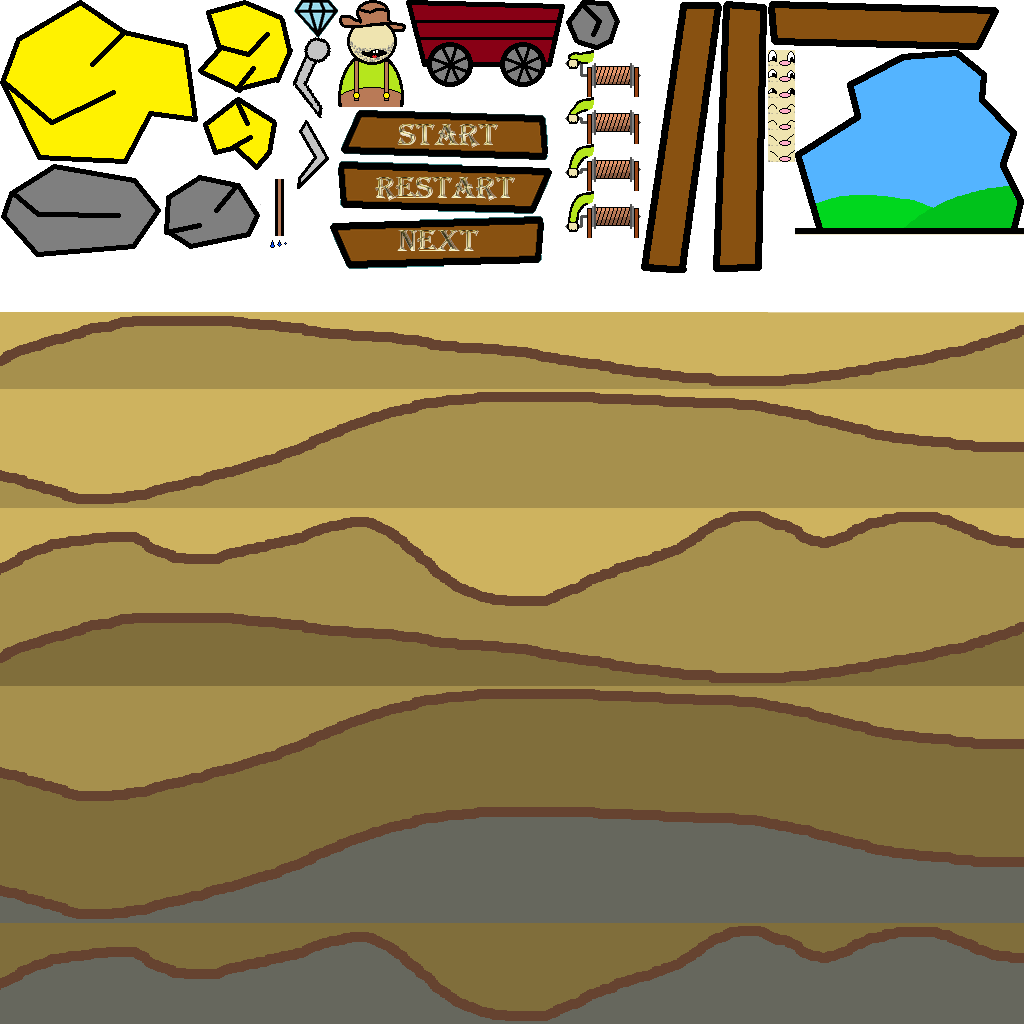
<style>
.page{position:relative;width:1024px;height:1024px;background:#a6904d}
.page>*{position:absolute;margin:0}
.t1{font:32px "Algerian"}
</style>
<div class="page">
<p class="t1" style="left:397px;top:124px;width:101px;height:24px">Start</p>
<p class="t1" style="left:397px;top:124px;width:101px;height:24px">Start</p>
<p class="t1" style="left:375px;top:177px;width:140px;height:24px">Restart</p>
<p class="t1" style="left:375px;top:177px;width:140px;height:24px">Restart</p>
<p class="t1" style="left:397px;top:230px;width:82px;height:21px">Next</p>
<p class="t1" style="left:397px;top:230px;width:82px;height:21px">Next</p>
</div>
